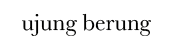
<style>
.page{position:relative;width:170px;height:50px;background:#ffffff}
.page>*{position:absolute;margin:0}
.t1{font:24px "Baskerville";color:#010100}
</style>
<div class="page">
<p class="t1" style="left:22px;top:13px;width:129px;height:23px">ujung berung</p>
</div>
